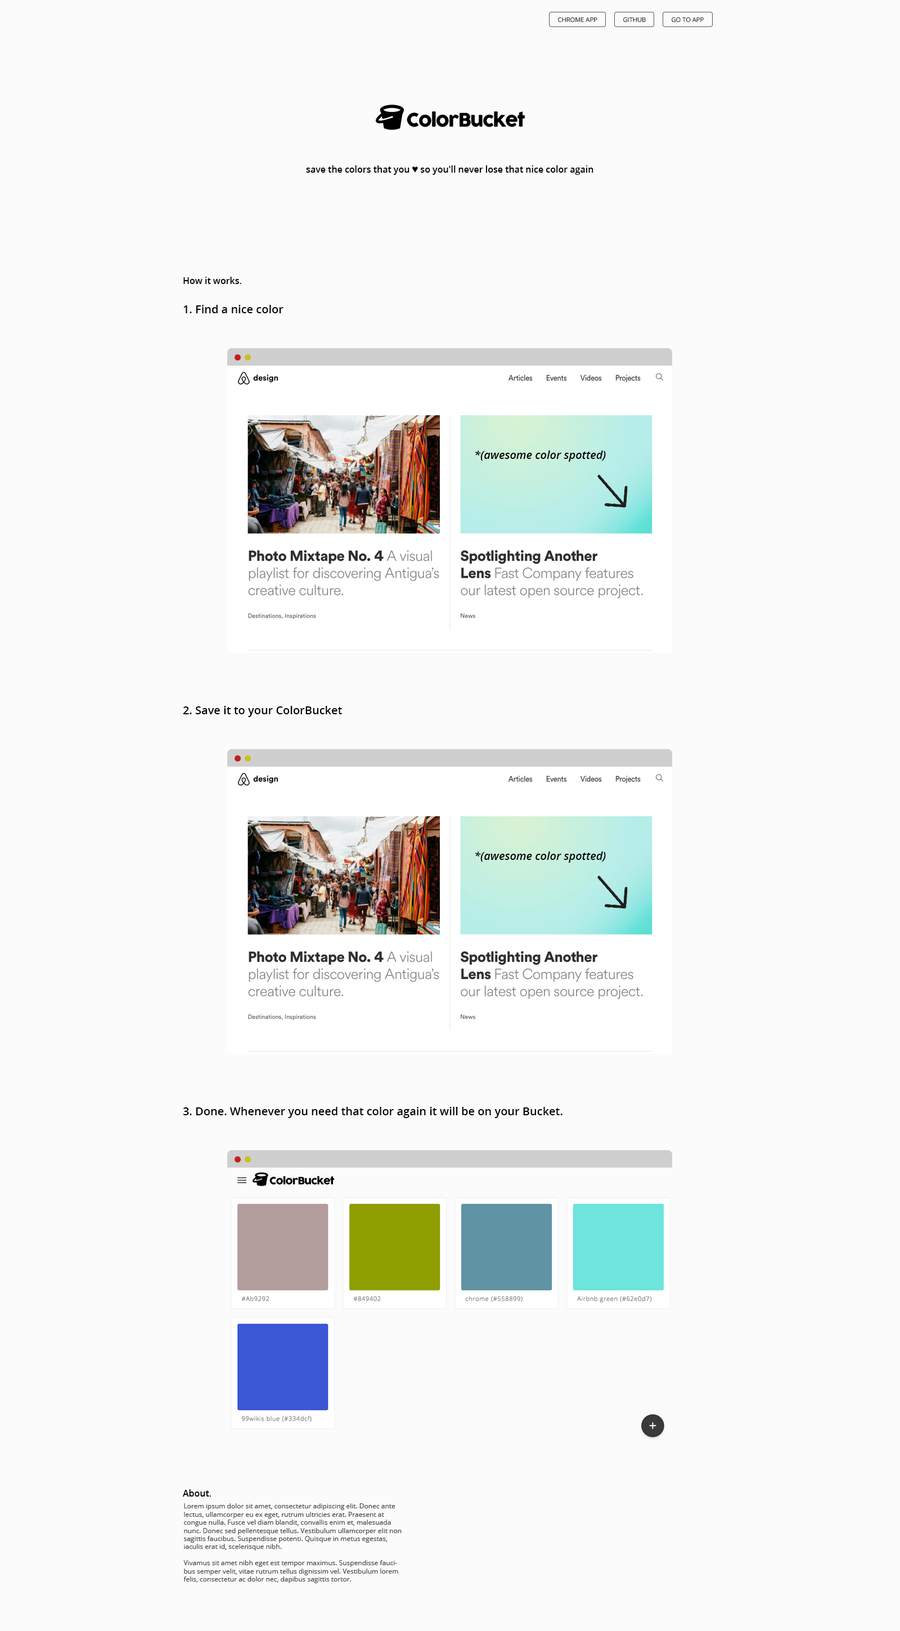
<style>
.page{position:relative;width:900px;height:1631px;background:#fbfbfb}
.page>*{position:absolute;margin:0}
.t1{font:6.3px "OpenSans";color:#2b2b2b}
.t2{font:18.4px "COCOGOOSE";letter-spacing:-0.05em;color:#000000}
.t3{font:9px "OpenSans-Semibold";color:#000000}
.t4{font:10.1px "ArialMT";color:#000000}
.t5{font:11.2px "OpenSans-Semibold";color:#000000}
.t6{font:11.2px "OpenSans-SemiboldItalic";color:#000000}
.t7{font:6.8px "OpenSans";color:#454545}
</style>
<div class="page">
<p class="t1" style="left:558px;top:17px;width:39px;height:5px">CHROME APP</p>
<p class="t1" style="left:623px;top:17px;width:23px;height:5px">GITHUB</p>
<p class="t1" style="left:672px;top:17px;width:32px;height:5px">GO TO APP</p>
<p class="t2" style="left:407px;top:111px;width:118px;height:16px">ColorBucket</p>
<p class="t3" style="left:306px;top:165px;width:287px;height:10px">save the colors that you <span class="t4">♥ </span>so you'll never lose that nice color again</p>
<p class="t3" style="left:183px;top:277px;width:58px;height:7px">How it works.</p>
<p class="t5" style="left:183px;top:305px;width:101px;height:8px">1. Find a nice color</p>
<p class="t6" style="left:475px;top:451px;width:131px;height:11px">*(awesome color spotted)</p>
<p class="t5" style="left:183px;top:706px;width:159px;height:11px">2. Save it to your ColorBucket</p>
<p class="t6" style="left:475px;top:852px;width:131px;height:11px">*(awesome color spotted)</p>
<p class="t5" style="left:183px;top:1107px;width:379px;height:11px">3. Done. Whenever you need that color again it will be on your Bucket.</p>
<p class="t3" style="left:183px;top:1490px;width:29px;height:7px">About.</p>
<p class="t7" style="left:183px;top:1504px;width:219px;height:79px">Lorem ipsum dolor sit amet, consectetur adipiscing elit. Donec ante lectus, ullamcorper eu ex eget, rutrum ultricies erat. Praesent at congue nulla. Fusce vel diam blandit, convallis enim et, malesuada nunc. Donec sed pellentesque tellus. Vestibulum ullamcorper elit non sagittis faucibus. Suspendisse potenti. Quisque in metus egestas, iaculis erat id, scelerisque nibh.<br><br>Vivamus sit amet nibh eget est tempor maximus. Suspendisse faucibus semper velit, vitae rutrum tellus dignissim vel. Vestibulum lorem felis, consectetur ac dolor nec, dapibus sagittis tortor.</p>
</div>
